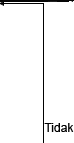
<style>
.page{position:relative;width:74px;height:143px;background:#ffffff}
.page>*{position:absolute;margin:0}
.t1{font:12px "ArialMT"}
</style>
<div class="page">
<p class="t1" style="left:44px;top:122px;width:30px;height:9px">Tidak</p>
</div>
